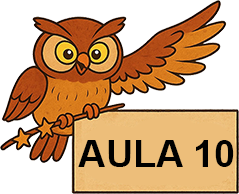
<style>
.page{position:relative;width:239px;height:194px;background:#ffffff}
.page>*{position:absolute;margin:0}
.t1{font:38px "Arial-BoldMT";color:#000000}
</style>
<div class="page">
<p class="t1" style="left:78px;top:140px;width:156px;height:27px">AULA 10</p>
</div>
